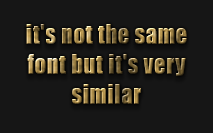
<style>
.page{position:relative;width:213px;height:133px;background:#161616}
.page>*{position:absolute;margin:0}
.t1{font:25px "Impact";letter-spacing:0.04em;scale:0.88 1}
</style>
<div class="page">
<p class="t1" style="left:26px;top:24px;width:161px;height:80px;text-align:center">it's not the same font but it's very similar</p>
</div>
